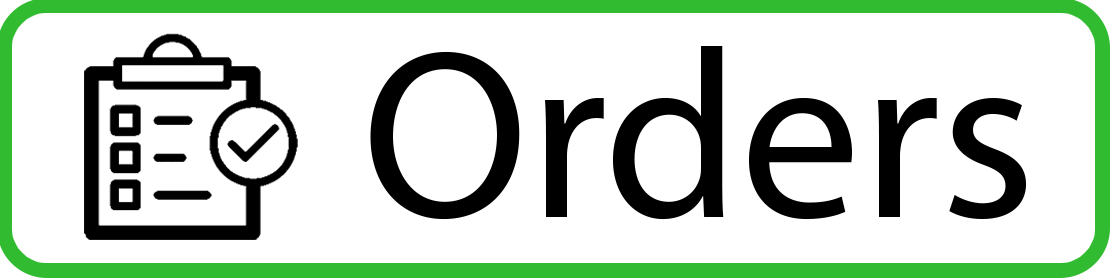
<style>
.page{position:relative;width:1110px;height:278px;background:#ffffff}
.page>*{position:absolute;margin:0}
.t1{font:241.3px "MyriadPro-Regular";color:#000000}
</style>
<div class="page">
<p class="t1" style="left:370px;top:46px;width:656px;height:174px">Orders</p>
</div>
